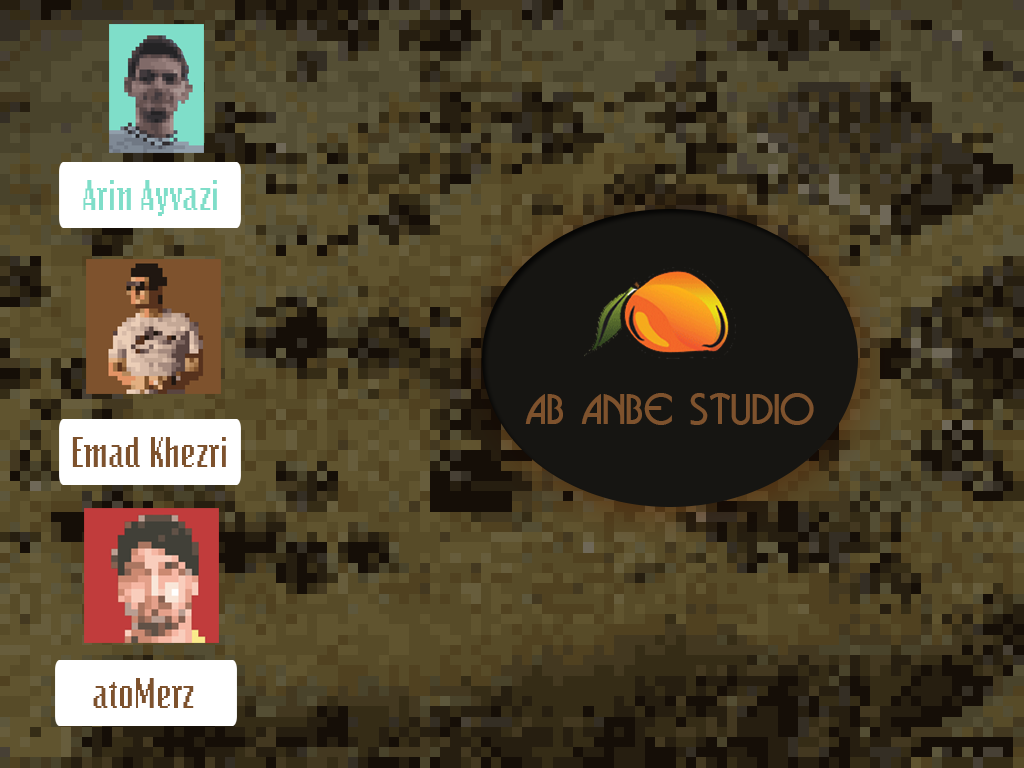
<style>
.page{position:relative;width:1024px;height:768px}
.page>*{position:absolute;margin:0}
.t1{font:42px "Bitmap";color:#7fdec9}
.t2{font:42px "Businko";color:#7e522d}
.t3{font:42px "Bitmap";color:#7e522d}
</style>
<div class="page">
<p class="t1" style="left:83px;top:180px;width:134px;height:36px">Arin Ayvazi</p>
<p class="t2" style="left:525px;top:393px;width:289px;height:32px">Ab Anbe Studio</p>
<p class="t3" style="left:72px;top:437px;width:154px;height:30px">Emad Khezri</p>
<p class="t3" style="left:93px;top:678px;width:101px;height:30px">atoMerz</p>
</div>
